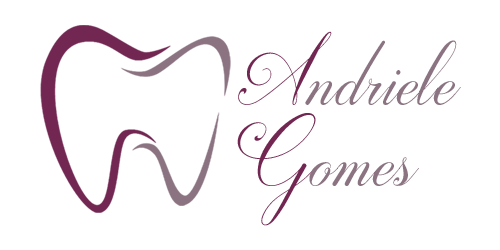
<style>
.page{position:relative;width:500px;height:250px;background:#ffffff}
.page>*{position:absolute;margin:0}
.t1{font:97.3px/80.5px "Darleston";color:#8b7381}
.t2{font:97.3px/80.5px "Darleston";color:#722752}
</style>
<div class="page">
<p class="t1" style="left:237px;top:31px;width:224px;height:195px"><span class="t2">A</span>ndriele <br><span class="t2">G</span>omes</p>
</div>
